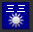
<style>
.page{position:relative;width:33px;height:32px;background:#000090}
.page>*{position:absolute;margin:0}
.t1{font:10.4px "SimSun";color:#ffffff}
</style>
<div class="page">
<p class="t1" style="left:6px;top:5px;width:19px;height:7px">三三</p>
</div>
